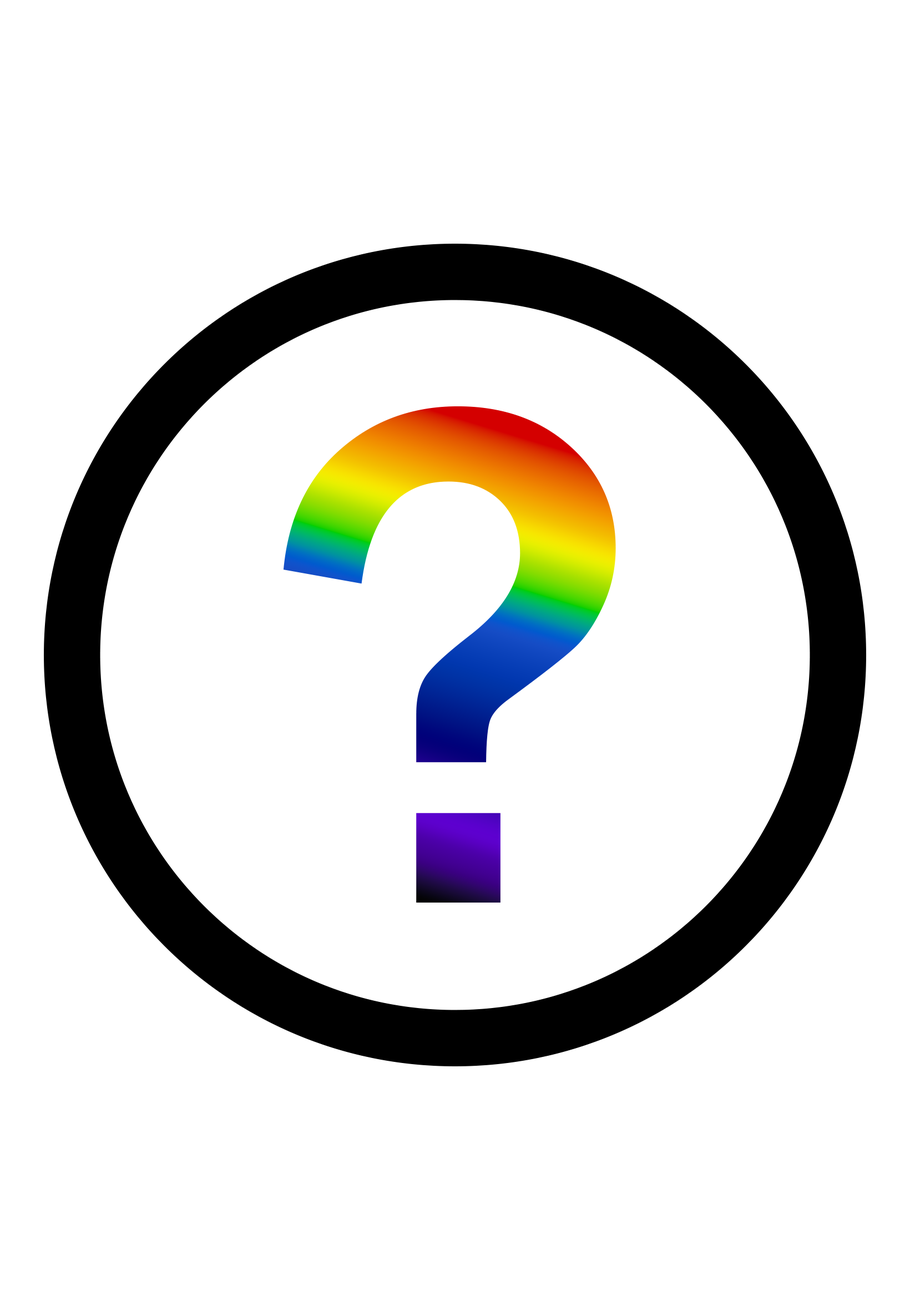
<style>
.page{position:relative;width:910px;height:1310px;background:#ffffff}
.page>*{position:absolute;margin:0}
.t1{font:733px "FranklinGothic-Medium";letter-spacing:-0.025em}
</style>
<div class="page">
<p class="t1" style="left:283px;top:406px;width:333px;height:497px">?</p>
</div>
